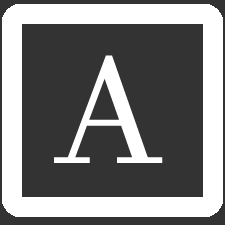
<style>
.page{position:relative;width:225px;height:225px;background:#333333}
.page>*{position:absolute;margin:0}
.t1{font:150px "JavaneseText";letter-spacing:0.035em;color:#ffffff}
</style>
<div class="page">
<p class="t1" style="left:54px;top:55px;width:109px;height:108px">A</p>
</div>
